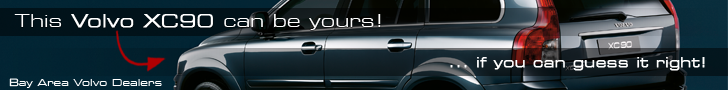
<style>
.page{position:relative;width:728px;height:90px}
.page>*{position:absolute;margin:0}
.t1{font:18px "Square721BT-RomanExtended";color:#ffffff}
.t2{font:18px "Square721BT-RomanExtended";color:#ffffff;font-weight:bold}
.t3{font:14px "Square721BT-RomanExtended";color:#ffffff;font-weight:bold}
.t4{font:10px "Square721BT-RomanExtended";color:#ffffff}
</style>
<div class="page">
<p class="t1" style="left:14px;top:14px;width:367px;height:16px">This <span class="t2">Volvo XC90 </span>can be yours!</p>
<p class="t3" style="left:450px;top:57px;width:255px;height:14px">... if you can guess it right!</p>
<p class="t4" style="left:9px;top:78px;width:153px;height:10px">Bay Area Volvo Dealers</p>
</div>
